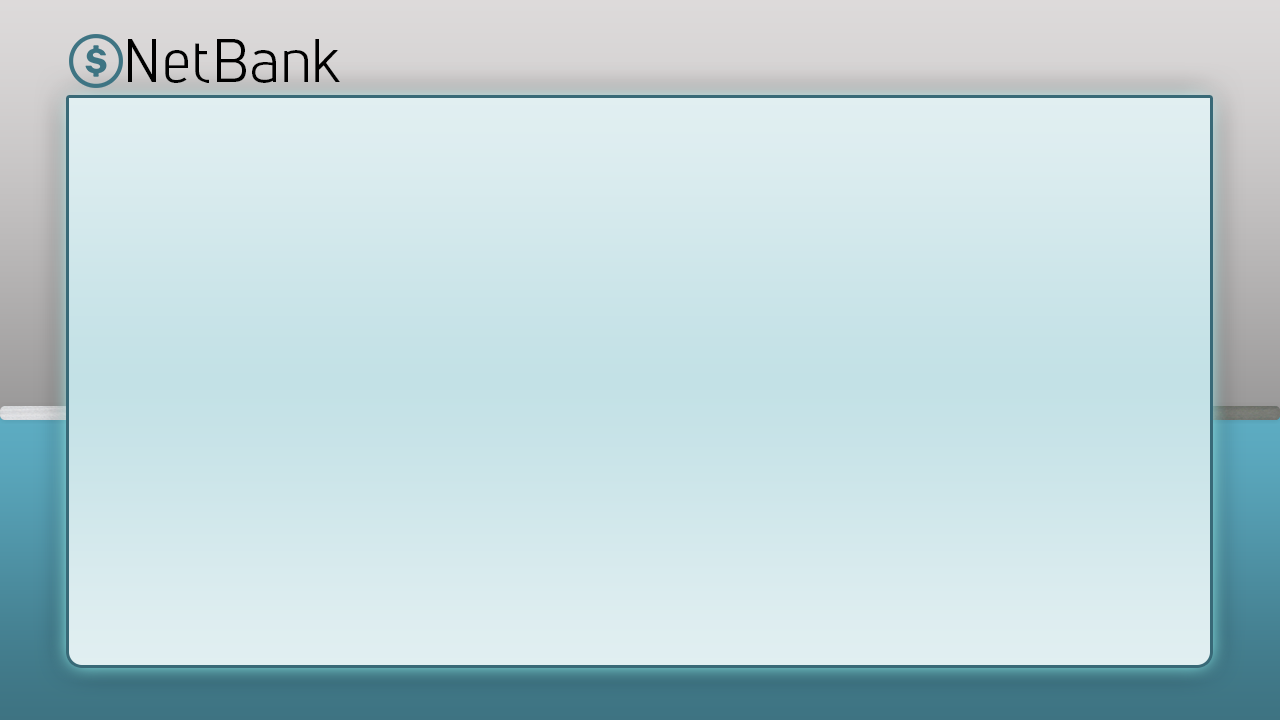
<style>
.page{position:relative;width:1280px;height:720px}
.page>*{position:absolute;margin:0}
.t1{font:61px "Lintel-Regular";color:#000000}
</style>
<div class="page">
<p class="t1" style="left:128px;top:39px;width:212px;height:44px">NetBank</p>
</div>
